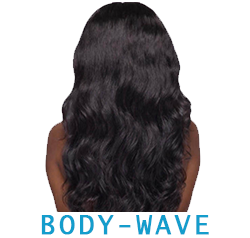
<style>
.page{position:relative;width:250px;height:238px;background:#ffffff}
.page>*{position:absolute;margin:0}
.t1{font:26px "LucidaSans-Typewriter";letter-spacing:0.1em;color:#149dcc;font-weight:bold}
</style>
<div class="page">
<p class="t1" style="left:41px;top:215px;width:168px;height:20px">BODY-WAVE</p>
</div>
